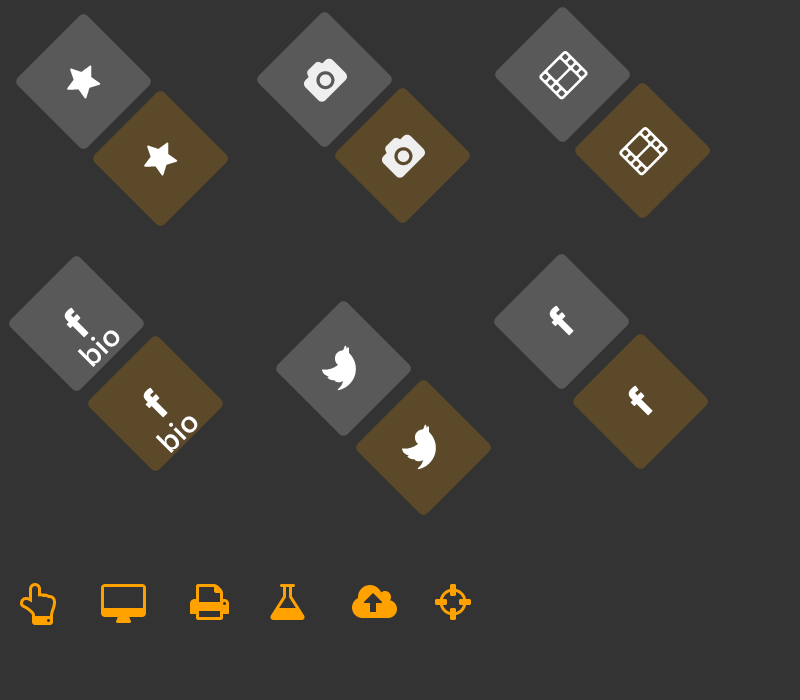
<style>
.page{position:relative;width:800px;height:700px;background:#333333}
.page>*{position:absolute;margin:0}
.t1{font:30px "SegoeUI-SemiBold";color:#ffffff}
</style>
<div class="page">
<p class="t1" style="left:77px;top:330px;width:43px;height:37px;rotate:-45deg">bio</p>
<p class="t1" style="left:155px;top:416px;width:43px;height:37px;rotate:-45deg">bio</p>
</div>
